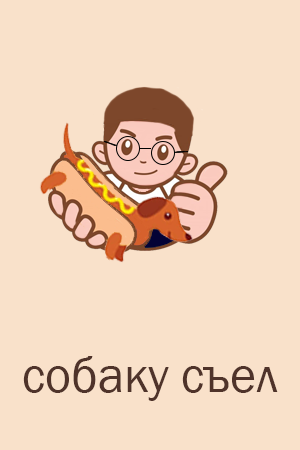
<style>
.page{position:relative;width:300px;height:450px;background:#f9e1ca}
.page>*{position:absolute;margin:0}
.t1{font:50px "FranklinGothic-Book";color:#4f332a}
</style>
<div class="page">
<p class="t1" style="left:23px;top:356px;width:255px;height:45px">собаку съел</p>
</div>
